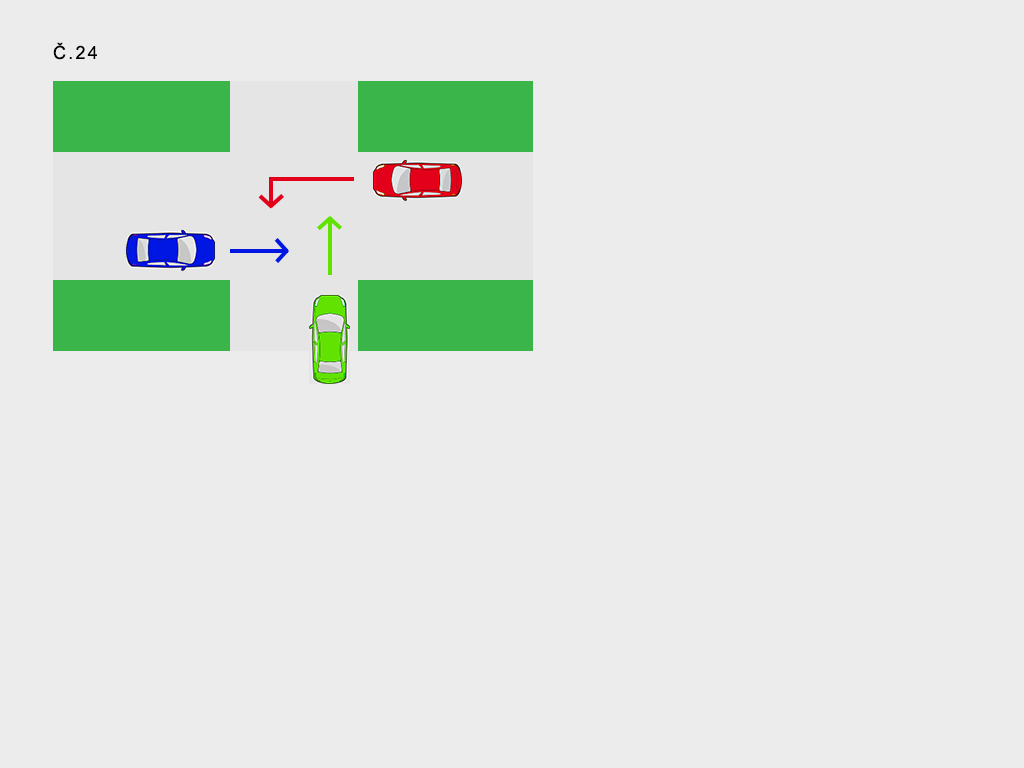
<style>
.page{position:relative;width:1024px;height:768px;background:#ececec}
.page>*{position:absolute;margin:0}
.t1{font:18px "ArialMT";letter-spacing:0.125em;color:#000000;text-transform:uppercase}
</style>
<div class="page">
<p class="t1" style="left:53px;top:42px;width:44px;height:18px">č.24</p>
</div>
